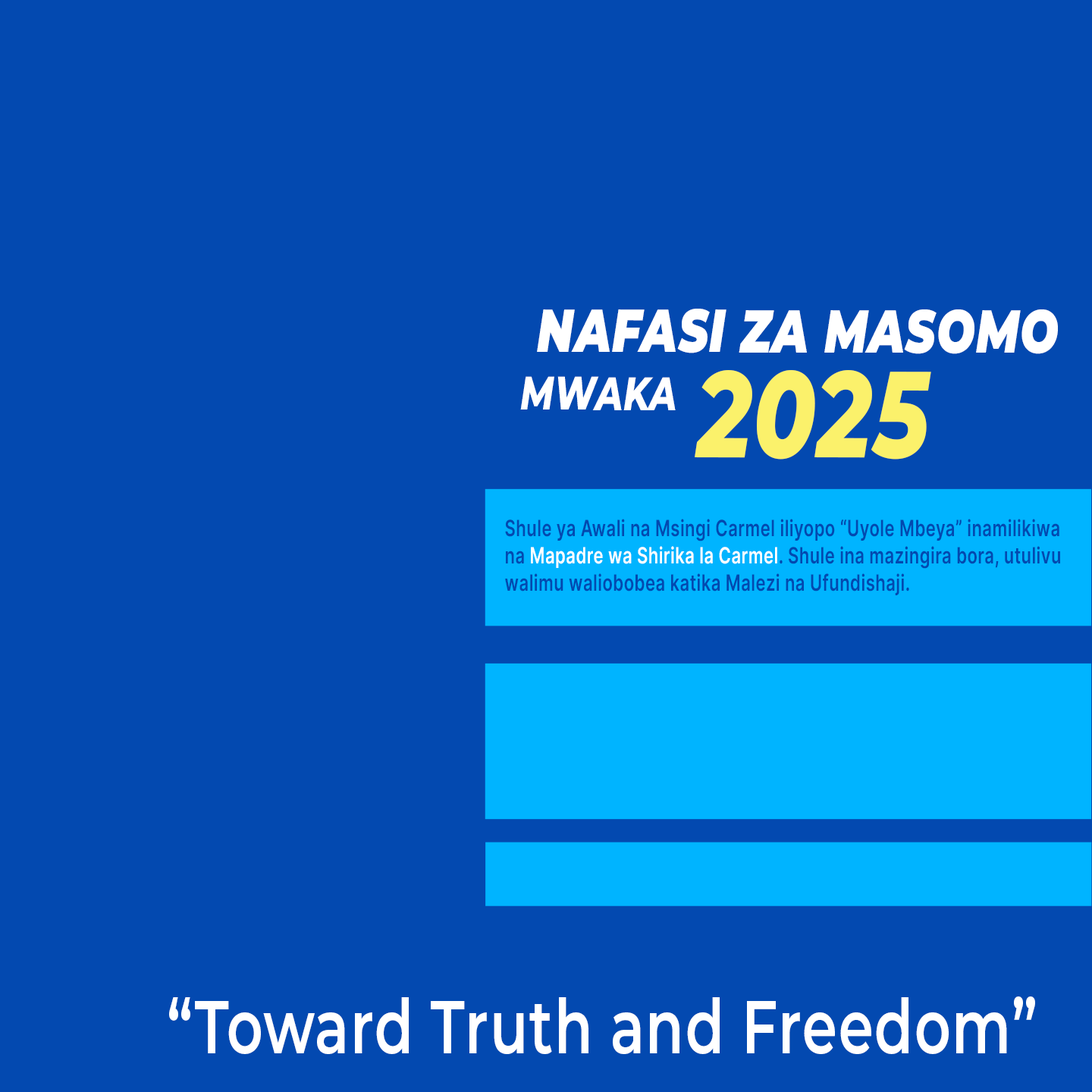
<style>
.page{position:relative;width:1092px;height:1092px;background:#0349b0}
.page>*{position:absolute;margin:0}
.t1{font:60.6px "Montserrat-BlackItalic";letter-spacing:0.02em;color:#ffffff;scale:0.75 1}
.t2{font:47px "Montserrat-ExtraBoldItalic";letter-spacing:0.02em;color:#ffffff;scale:0.75 1}
.t3{font:122.2px "Montserrat-ExtraBoldItalic";letter-spacing:0.02em;color:#fbf16b;scale:0.75 1}
.t4{font:22.4px/27.2px "Inter-SemiBold";letter-spacing:0.02em;color:#0349b0;scale:0.75 1}
.t5{font:22.4px/27.2px "Inter-SemiBold";letter-spacing:0.02em;color:#ffffff;scale:0.75 1}
.t6{font:75.1px "Montserrat-SemiBold";letter-spacing:0.02em;color:#ffffff;scale:0.75 1}
</style>
<div class="page">
<p class="t1" style="left:537px;top:309px;width:521px;height:45px">NAFASI ZA MASOMO</p>
<p class="t2" style="left:520px;top:376px;width:156px;height:34px">MWAKA</p>
<p class="t3" style="left:695px;top:370px;width:236px;height:90px">2025</p>
<p class="t4" style="left:505px;top:519px;width:555px;height:76px">Shule ya Awali na Msingi Carmel iliyopo “Uyole Mbeya” inamilikiwa<br>na <span class="t5">Mapadre wa Shirika la Carmel</span>. Shule ina mazingira bora, utulivu<br>walimu waliobobea katika Malezi na Ufundishaji.</p>
<p class="t6" style="left:169px;top:996px;width:866px;height:58px">“Toward Truth and Freedom”</p>
</div>
